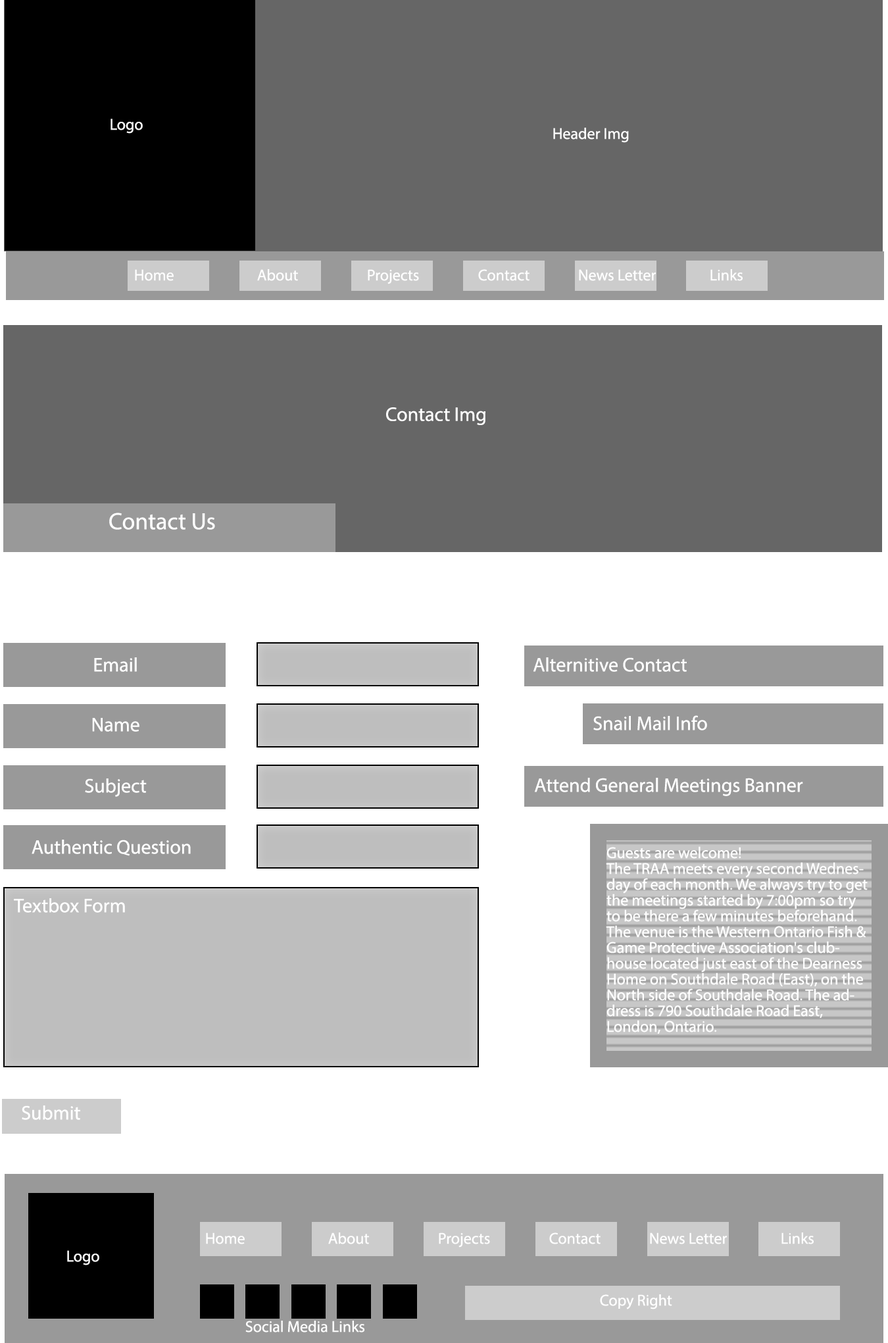
<style>
.page{position:relative;width:888px;height:1343px;background:#666666}
.page>*{position:absolute;margin:0}
.t1{font:15.8px "MyriadPro-Regular";color:#ffffff}
.t2{font:19.7px "MyriadPro-Regular";color:#ffffff}
.t3{font:23.7px "MyriadPro-Regular";color:#ffffff}
.t4{font:15.8px/15.8px "MyriadPro-Regular";color:#ffffff}
</style>
<div class="page">
<p class="t1" style="left:111px;top:118px;width:32px;height:16px">Logo</p>
<p class="t1" style="left:553px;top:128px;width:76px;height:15px">Header Img</p>
<p class="t1" style="left:135px;top:269px;width:39px;height:12px">Home</p>
<p class="t1" style="left:257px;top:269px;width:41px;height:12px">About</p>
<p class="t1" style="left:368px;top:269px;width:51px;height:15px">Projects</p>
<p class="t1" style="left:478px;top:269px;width:52px;height:12px">Contact</p>
<p class="t1" style="left:579px;top:269px;width:77px;height:12px">News Letter</p>
<p class="t1" style="left:710px;top:269px;width:33px;height:12px">Links</p>
<p class="t2" style="left:386px;top:407px;width:99px;height:18px">Contact Img</p>
<p class="t3" style="left:109px;top:512px;width:106px;height:18px"><span class="t2"><br></span>Contact Us</p>
<p class="t2" style="left:94px;top:657px;width:43px;height:15px">Email</p>
<p class="t2" style="left:533px;top:657px;width:154px;height:15px">Alternitive Contact</p>
<p class="t2" style="left:92px;top:718px;width:47px;height:14px">Name</p>
<p class="t2" style="left:593px;top:715px;width:114px;height:15px">Snail Mail Info</p>
<p class="t2" style="left:85px;top:778px;width:62px;height:19px">Subject</p>
<p class="t2" style="left:534px;top:778px;width:269px;height:18px">Attend General Meetings Banner</p>
<p class="t2" style="left:32px;top:839px;width:159px;height:17px">Authentic Question</p>
<p class="t4" style="left:606px;top:846px;width:262px;height:187px">Guests are welcome!<br>The TRAA meets every second Wednesday of each month. We always try to get the meetings started by 7:00pm so try to be there a few minutes beforehand. The venue is the Western Ontario Fish &amp; Game Protective Association's clubhouse located just east of the Dearness Home on Southdale Road (East), on the North side of Southdale Road. The address is 790 Southdale Road East, London, Ontario.<br><br>Note: Every now and then we have "off-site" meetings. For example, the July and August meetings are "fishing meetings" so we won't be at WOFGPA clubhouse. Stay on top of these changes by visiting this Web site often.</p>
<p class="t2" style="left:14px;top:898px;width:111px;height:14px">Textbox Form</p>
<p class="t2" style="left:22px;top:1105px;width:58px;height:15px">Submit</p>
<p class="t1" style="left:206px;top:1232px;width:39px;height:12px">Home</p>
<p class="t1" style="left:328px;top:1232px;width:41px;height:12px">About</p>
<p class="t1" style="left:439px;top:1232px;width:51px;height:15px">Projects</p>
<p class="t1" style="left:549px;top:1232px;width:52px;height:12px">Contact</p>
<p class="t1" style="left:650px;top:1232px;width:77px;height:12px">News Letter</p>
<p class="t1" style="left:782px;top:1232px;width:32px;height:12px">Links</p>
<p class="t1" style="left:67px;top:1250px;width:32px;height:15px">Logo</p>
<p class="t1" style="left:600px;top:1294px;width:72px;height:15px">Copy Right</p>
<p class="t1" style="left:245px;top:1320px;width:119px;height:12px">Social Media Links</p>
</div>
